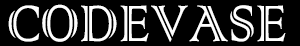
<style>
.page{position:relative;width:300px;height:46px;background:#000000}
.page>*{position:absolute;margin:0}
.t1{font:67.3px "ColonnaMT";letter-spacing:0.01em;color:#fefefe;scale:0.87 1}
</style>
<div class="page">
<p class="t1" style="left:8px;top:4px;width:278px;height:38px">CODEVASE</p>
</div>
